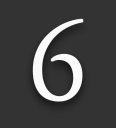
<style>
.page{position:relative;width:116px;height:128px;background:#333333}
.page>*{position:absolute;margin:0}
.t1{font:102px "KoPubWorldBatangMedium";color:#fafafa}
</style>
<div class="page">
<p class="t1" style="left:32px;top:18px;width:52px;height:84px">6</p>
</div>
